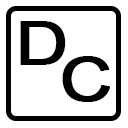
<style>
.page{position:relative;width:128px;height:128px;background:#ffffff}
.page>*{position:absolute;margin:0}
.t1{font:60px/36px "ArialMT";color:#000000;font-weight:bold;scale:1.2 1}
</style>
<div class="page">
<p class="t1" style="left:20px;top:21px;width:90px;height:81px;text-align:center">D<br>    C</p>
</div>
